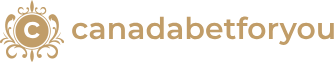
<style>
.page{position:relative;width:335px;height:62px;background:#ffffff}
.page>*{position:absolute;margin:0}
.t1{font:30px "Montserrat-SemiBold";color:#c19d68}
.t2{font:30px "Montserrat-SemiBold";color:#ffffff}
</style>
<div class="page">
<p class="t1" style="left:72px;top:16px;width:262px;height:30px">canadabetforyou</p>
<p class="t2" style="left:24px;top:21px;width:16px;height:18px">c</p>
</div>
